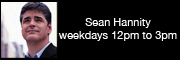
<style>
.page{position:relative;width:180px;height:60px;background:#000000}
.page>*{position:absolute;margin:0}
.t1{font:11px "HelveticaNeue";color:#ffffff}
</style>
<div class="page">
<p class="t1" style="left:58px;top:18px;width:119px;height:23px;text-align:center">Sean Hannity<br>weekdays 12pm to 3pm</p>
</div>
